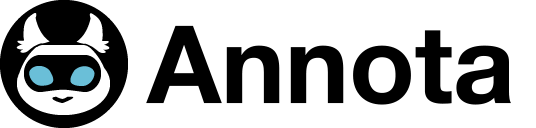
<style>
.page{position:relative;width:536px;height:128px;background:#ffffff}
.page>*{position:absolute;margin:0}
.t1{font:108px "HelveticaNeueBold";color:#000000}
</style>
<div class="page">
<p class="t1" style="left:146px;top:25px;width:365px;height:80px">Annota</p>
</div>
